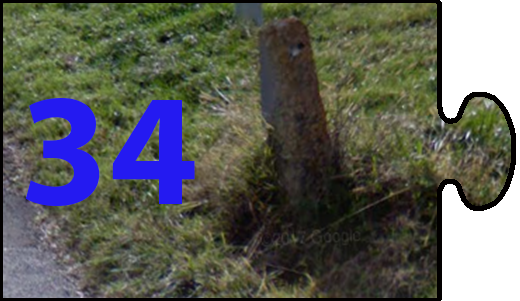
<style>
.page{position:relative;width:520px;height:301px}
.page>*{position:absolute;margin:0}
.t1{font:160px "MyriadPro-Bold";color:#241af1}
</style>
<div class="page">
<p class="t1" style="left:25px;top:98px;width:170px;height:109px">34</p>
</div>
